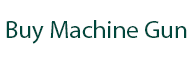
<style>
.page{position:relative;width:192px;height:64px;background:#ffffff}
.page>*{position:absolute;margin:0}
.t1{font:25px "MyriadPro-Regular";color:#00473c}
</style>
<div class="page">
<p class="t1" style="left:6px;top:20px;width:181px;height:24px">Buy Machine Gun</p>
</div>
